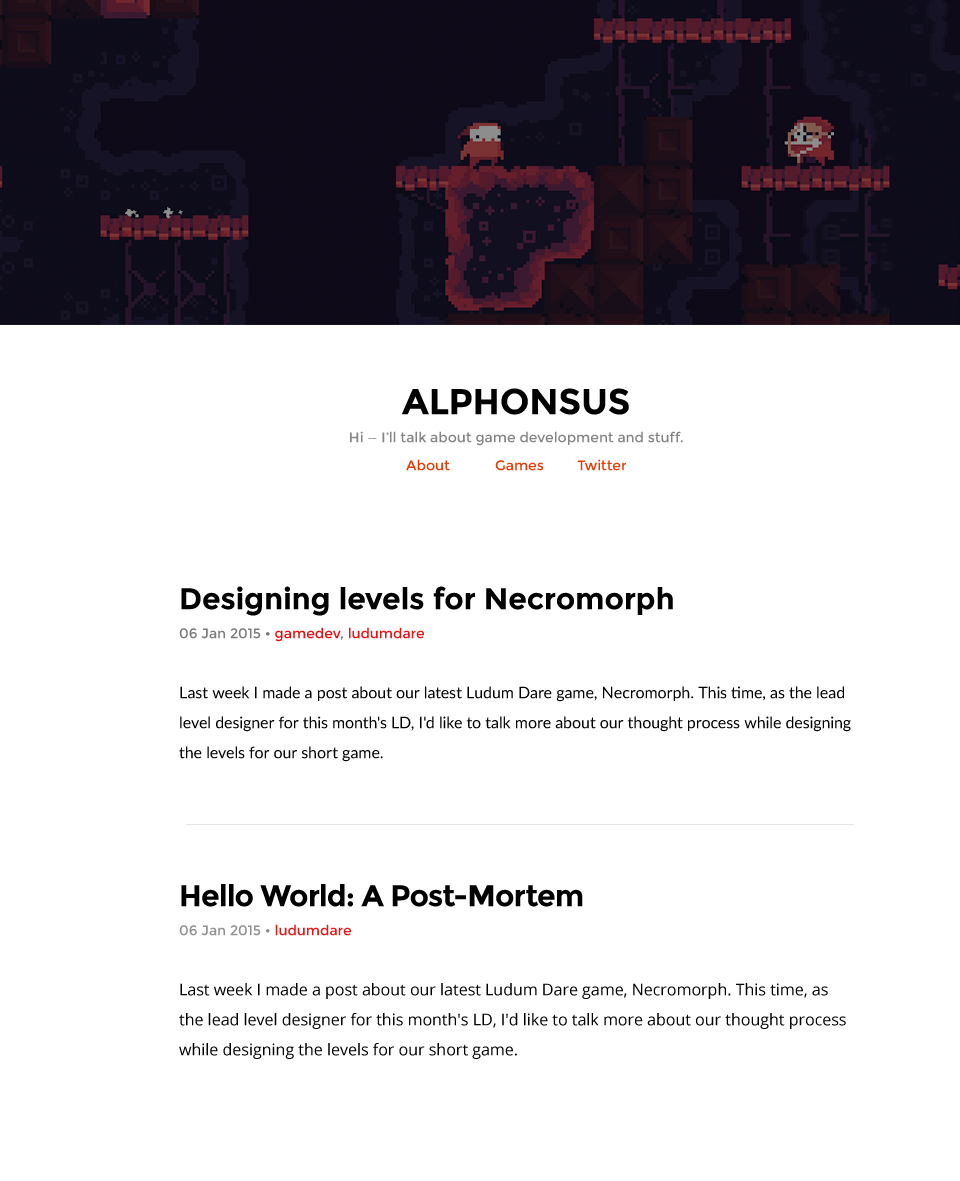
<style>
.page{position:relative;width:960px;height:1181px;background:#ffffff}
.page>*{position:absolute;margin:0}
.t1{font:14px/28px "Montserrat-Regular";color:#858585}
.t2{font:36px/28px "Montserrat-Bold";color:#000000}
.t3{font:14px/28px "Montserrat-Regular";color:#e73b05}
.t4{font:16px/30px "Lato-Regular";color:#000000}
.t5{font:30px "Montserrat-Bold";color:#000000}
.t6{font:14px/29px "Montserrat-Regular";color:#7b7b7b}
.t7{font:14px/29px "Montserrat-Regular";color:#ea0e0e}
.t8{font:14px/29px "Montserrat-Regular";color:#787878}
.t9{font:14px/29px "Montserrat-Regular";color:#e81616}
.t10{font:16px/30px "OpenSans";color:#000000}
.t11{font:30px "Montserrat-Bold";letter-spacing:-0.025em;color:#000000}
.t12{font:14px/29px "Montserrat-Regular";color:#909090}
</style>
<div class="page">
<p class="t1" style="left:350px;top:388px;width:333px;height:83px;text-align:center"><span class="t2">ALPHONSUS<br></span>Hi — I’ll talk about game development and stuff.<br><span class="t3">About   Games     Twitter</span></p>
<p class="t4" style="left:179px;top:586px;width:672px;height:176px"><span class="t5">Designing levels for Necromorph<br></span><span class="t6">06 Jan 2015 • </span><span class="t7">gamedev</span><span class="t8">, </span><span class="t9">ludumdare<br><br></span>Last week I made a post about our latest Ludum Dare game, Necromorph. This time, as the lead level designer for this month's LD, I'd like to talk more about our thought process while designing the levels for our short game.</p>
<p class="t10" style="left:179px;top:884px;width:667px;height:175px"><span class="t11">Hello World: A Post-Mortem<br></span><span class="t12">06 Jan 2015 • </span><span class="t9">ludumdare<br></span><br>Last week I made a post about our latest Ludum Dare game, Necromorph. This time, as the lead level designer for this month's LD, I'd like to talk more about our thought process while designing the levels for our short game.</p>
</div>
